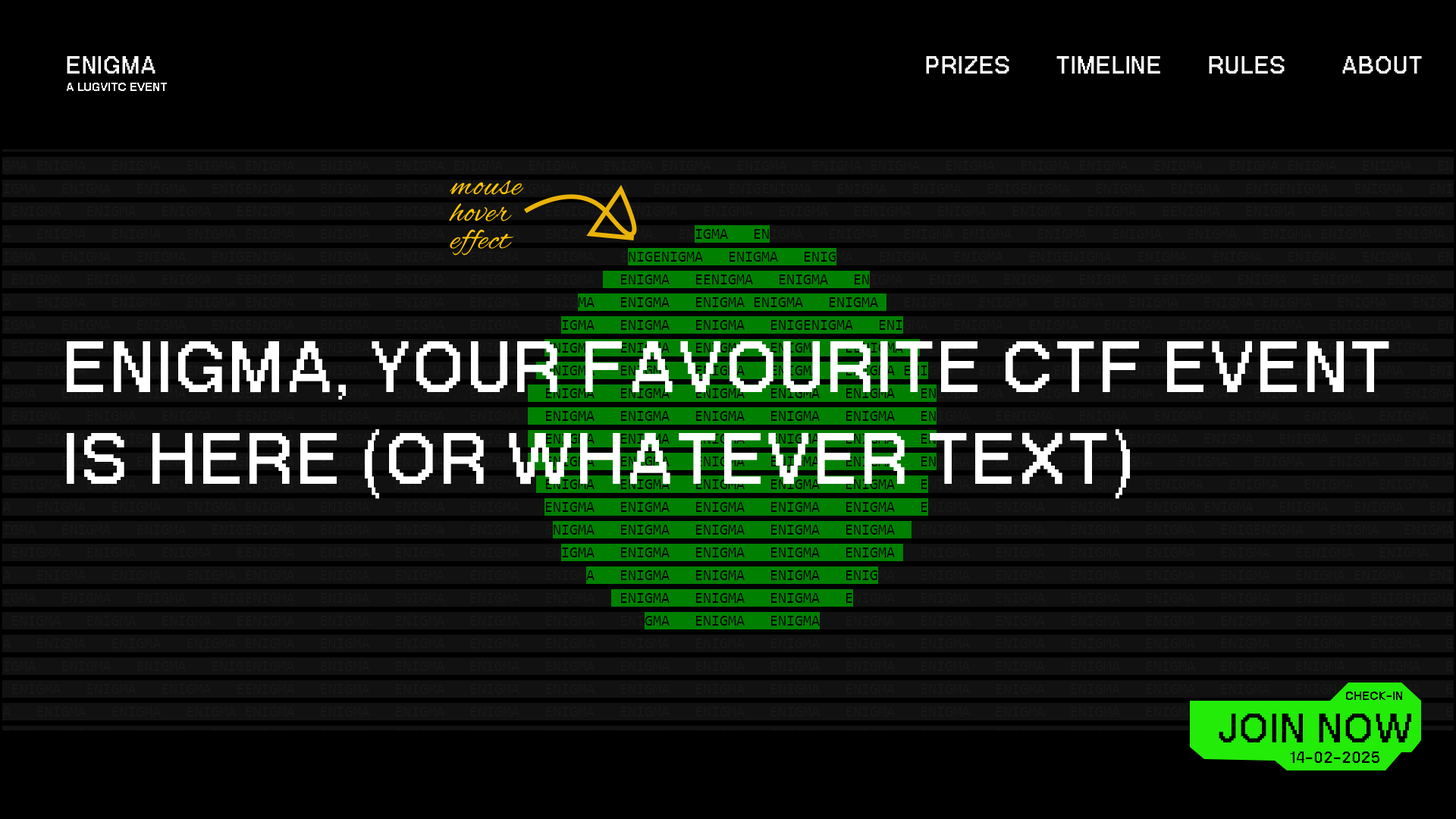
<style>
.page{position:relative;width:1456px;height:819px;background:#000000}
.page>*{position:absolute;margin:0}
.t1{font:33.8px "PPNeueBit-Bold";letter-spacing:0.03em;color:#ffffff}
.t2{font:16.7px "PPNeueBit-Bold";letter-spacing:0.03em;color:#ffffff}
.t3{font:33.8px/27.1px "AlexBrush-Regular";letter-spacing:0.03em;color:#ffc600}
.t4{font:102px/92px "PPNeueBit-Bold";letter-spacing:0.03em;color:#ffffff}
.t5{font:16.7px "PPNeueBit-Bold";letter-spacing:0.03em;color:#000000}
.t6{font:58.3px "PPNeueBit-Bold";letter-spacing:0.03em;color:#000000}
.t7{font:22.8px "PPNeueBit-Bold";letter-spacing:0.03em;color:#000000}
</style>
<div class="page">
<p class="t1" style="left:67px;top:56px;width:88px;height:18px">ENIGMA</p>
<p class="t1" style="left:926px;top:56px;width:83px;height:18px">PRIZES</p>
<p class="t1" style="left:1056px;top:56px;width:104px;height:18px">TIMELINE</p>
<p class="t1" style="left:1209px;top:56px;width:76px;height:18px">RULES</p>
<p class="t1" style="left:1342px;top:56px;width:80px;height:18px">ABOUT</p>
<p class="t2" style="left:67px;top:83px;width:100px;height:8px">A LUGVITC EVENT</p>
<p class="t3" style="left:449px;top:180px;width:75px;height:76px">mouse<br>hover<br>effect</p>
<p class="t4" style="left:67px;top:340px;width:1322px;height:159px">ENIGMA, YOUR FAVOURITE CTF EVENT<br>IS HERE (OR WHATEVER TEXT)</p>
<p class="t5" style="left:1346px;top:692px;width:56px;height:8px">CHECK-IN</p>
<p class="t6" style="left:1219px;top:714px;width:192px;height:28px">JOIN NOW</p>
<p class="t7" style="left:1290px;top:751px;width:89px;height:12px">14-02-2025</p>
</div>
